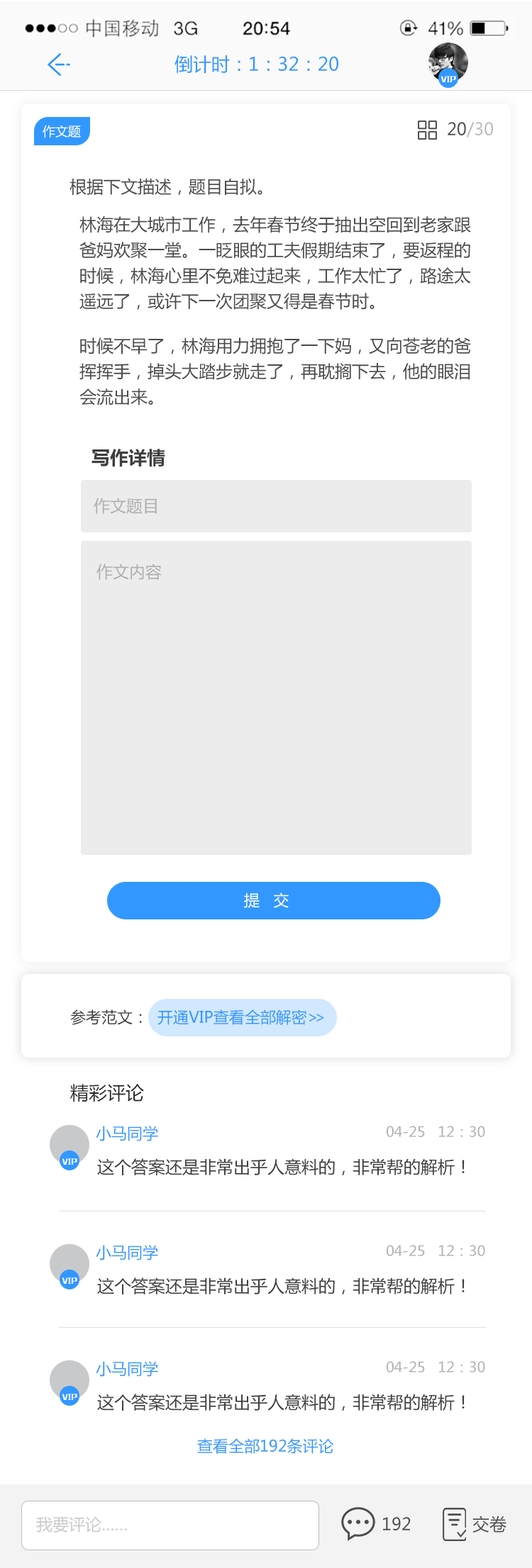
<style>
.page{position:relative;width:532px;height:1568px;background:#ffffff}
.page>*{position:absolute;margin:0}
.t1{font:18.4px "MicrosoftYaHei";color:#3298ff}
.t2{font:6.6px "MFLiHei_Noncommercial-Regular";color:#ffffff}
.t3{font:12.8px "MicrosoftYaHei";color:#ffffff}
.t4{font:17px "MicrosoftYaHei";color:#bdbdbd}
.t5{font:17px "MicrosoftYaHei";color:#4e4e4e}
.t6{font:17px "MicrosoftYaHei";color:#4b4a4a}
.t7{font:17px/25.5px "MicrosoftYaHei";color:#4b4a4a}
.t8{font:18.4px "MicrosoftYaHei-Bold";color:#3e3e3e}
.t9{font:16.3px "MicrosoftYaHei";color:#afafaf}
.t10{font:15.6px "MicrosoftYaHei";letter-spacing:0.1em;color:#ffffff}
.t11{font:15.6px "MicrosoftYaHei";color:#3298ff}
.t12{font:15.6px "MicrosoftYaHei";color:#3e3e3e}
.t13{font:15.6px "MicrosoftYaHei";letter-spacing:-0.26em;color:#3298ff}
.t14{font:18.4px "MicrosoftYaHei";color:#292929}
.t15{font:14.2px "MicrosoftYaHei";color:#b2b2b2}
.t16{font:17px "MicrosoftYaHei";color:#3e3e3e}
.t17{font:16.3px "MicrosoftYaHei";color:#cbcaca}
</style>
<div class="page">
<p class="t1" style="left:174px;top:55px;width:164px;height:19px">倒计时：1：32：20</p>
<p class="t2" style="left:440px;top:76px;width:16px;height:6px">VIP</p>
<p class="t3" style="left:43px;top:125px;width:38px;height:13px">作文题</p>
<p class="t4" style="left:447px;top:122px;width:46px;height:16px"><span class="t5">20</span>/30</p>
<p class="t6" style="left:69px;top:178px;width:193px;height:17px">根据下文描述，题目自拟。</p>
<p class="t7" style="left:79px;top:216px;width:392px;height:94px">林海在大城市工作，去年春节终于抽出空回到老家跟爸妈欢聚一堂。一眨眼的工夫假期结束了，要返程的时候，林海心里不免难过起来，工作太忙了，路途太遥远了，或许下一次团聚又得是春节时。</p>
<p class="t7" style="left:79px;top:337px;width:392px;height:68px">时候不早了，林海用力拥抱了一下妈，又向苍老的爸挥挥手，掉头大踏步就走了，再耽搁下去，他的眼泪会流出来。</p>
<p class="t8" style="left:91px;top:449px;width:74px;height:18px">写作详情</p>
<p class="t9" style="left:94px;top:498px;width:63px;height:16px">作文题目</p>
<p class="t9" style="left:96px;top:564px;width:66px;height:16px">作文内容</p>
<p class="t10" style="left:244px;top:892px;width:45px;height:16px">提  交</p>
<p class="t11" style="left:70px;top:1009px;width:254px;height:16px"><span class="t12">参考范文：  </span>开通VIP查看全部解密<span class="t13">&gt;&gt;</span></p>
<p class="t14" style="left:70px;top:1084px;width:74px;height:18px">精彩评论</p>
<p class="t11" style="left:96px;top:1126px;width:62px;height:15px">小马同学</p>
<p class="t15" style="left:386px;top:1126px;width:99px;height:11px">04-25   12：30</p>
<p class="t2" style="left:62px;top:1158px;width:15px;height:7px">VIP</p>
<p class="t16" style="left:97px;top:1158px;width:367px;height:18px">这个答案还是非常出乎人意料的，非常帮的解析！</p>
<p class="t11" style="left:96px;top:1245px;width:62px;height:15px">小马同学</p>
<p class="t15" style="left:386px;top:1245px;width:99px;height:11px">04-25   12：30</p>
<p class="t2" style="left:62px;top:1277px;width:15px;height:7px">VIP</p>
<p class="t16" style="left:97px;top:1277px;width:367px;height:18px">这个答案还是非常出乎人意料的，非常帮的解析！</p>
<p class="t11" style="left:96px;top:1361px;width:62px;height:16px">小马同学</p>
<p class="t15" style="left:386px;top:1361px;width:99px;height:11px">04-25   12：30</p>
<p class="t2" style="left:62px;top:1394px;width:15px;height:6px">VIP</p>
<p class="t16" style="left:97px;top:1394px;width:367px;height:17px">这个答案还是非常出乎人意料的，非常帮的解析！</p>
<p class="t11" style="left:197px;top:1438px;width:137px;height:16px">查看全部192条评论</p>
<p class="t17" style="left:36px;top:1516px;width:91px;height:17px">我要评论……</p>
<p class="t5" style="left:383px;top:1517px;width:27px;height:13px">192</p>
<p class="t5" style="left:472px;top:1516px;width:34px;height:17px">交卷</p>
</div>
